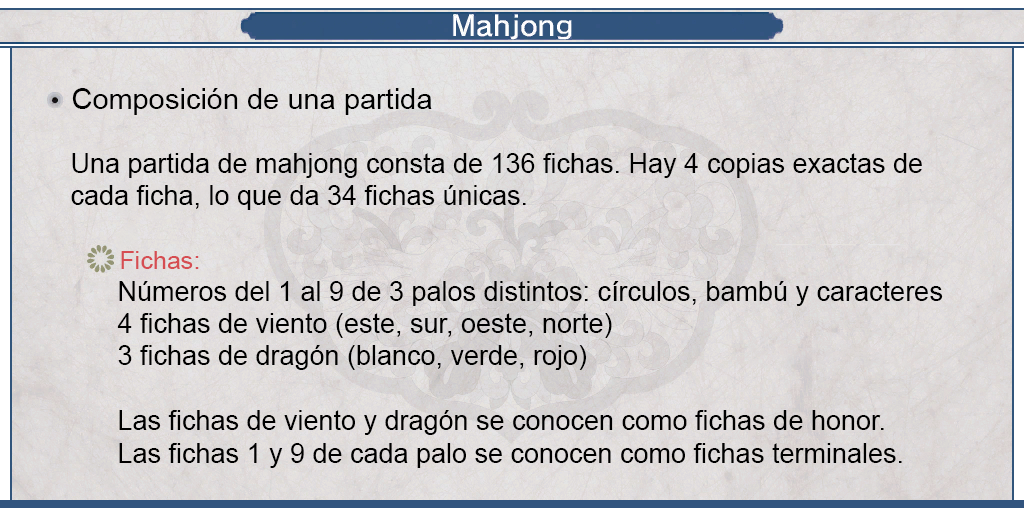
<style>
.page{position:relative;width:1024px;height:512px}
.page>*{position:absolute;margin:0}
.t1{font:29px "ArialMT";color:#000000}
.t2{font:27px "ArialMT";color:#000000}
.t3{font:24.8px "ArialMT";color:#d64d52}
</style>
<div class="page">
<p class="t1" style="left:72px;top:88px;width:360px;height:27px">Composición de una partida</p>
<p class="t2" style="left:71px;top:153px;width:851px;height:57px;text-align:justify">Una partida de mahjong consta de 136 fichas. Hay 4 copias exactas de <br>cada ficha, lo que da 34 fichas únicas.</p>
<p class="t3" style="left:121px;top:251px;width:78px;height:18px">Fichas:</p>
<p class="t2" style="left:117px;top:281px;width:826px;height:187px;text-align:justify">Números del 1 al 9 de 3 palos distintos: círculos, bambú y caracteres<br>4 fichas de viento (este, sur, oeste, norte)<br>3 fichas de dragón (blanco, verde, rojo)<br><br>Las fichas de viento y dragón se conocen como fichas de honor.<br>Las fichas 1 y 9 de cada palo se conocen como fichas terminales.</p>
</div>
